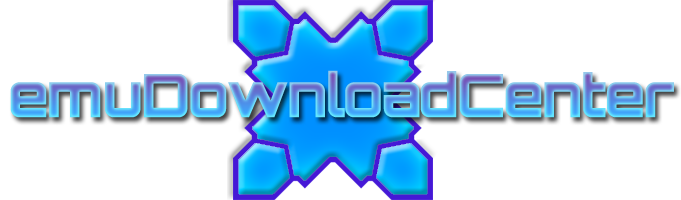
<style>
.page{position:relative;width:681px;height:200px;background:#ffffff}
.page>*{position:absolute;margin:0}
.t1{font:60px "Orbitron-Black";letter-spacing:-0.05em}
</style>
<div class="page">
<p class="t1" style="left:10px;top:70px;width:664px;height:48px">emuDownloadCenter</p>
</div>
